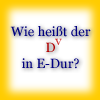
<style>
.page{position:relative;width:100px;height:100px}
.page>*{position:absolute;margin:0}
.t1{font:13.3px "Georgia";color:#000080}
.t2{font:13.3px "Georgia";color:#b10000}
.t3{font:13.3px "Georgia";color:#cc3333}
</style>
<div class="page">
<p class="t1" style="left:10px;top:26px;width:81px;height:43px;text-align:center">Wie heißt der<br><span class="t2">D<br></span>in E-Dur?</p>
<p class="t3" style="left:55px;top:38px;width:7px;height:7px">v</p>
</div>
